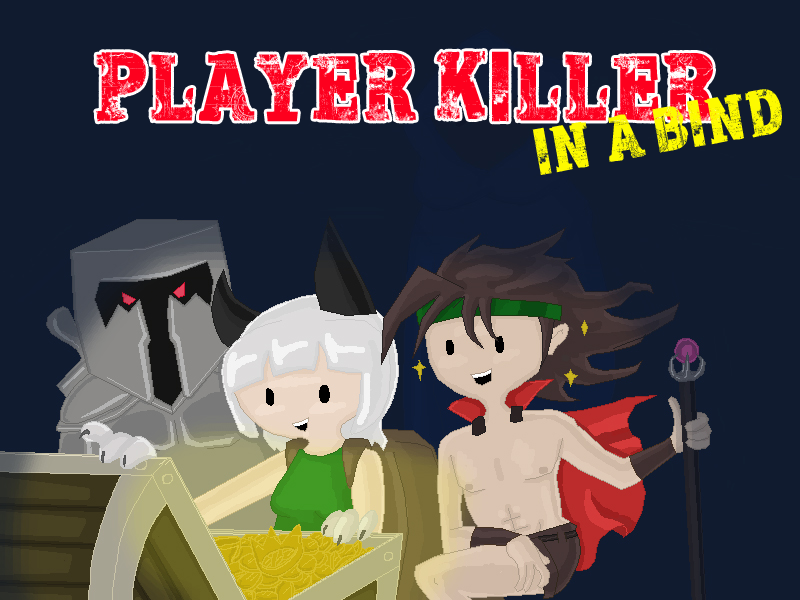
<style>
.page{position:relative;width:800px;height:600px;background:#101b2f}
.page>*{position:absolute;margin:0}
.t1{font:72px "Apocalypse-Regular";color:#fd001e}
.t2{font:48px "Apocalypse-Regular";color:#fdfa00}
</style>
<div class="page">
<p class="t1" style="left:96px;top:51px;width:621px;height:71px">PLAYER KILLER</p>
<p class="t2" style="left:532px;top:89px;width:250px;height:86px;rotate:-10deg">(IN A BIND</p>
</div>
